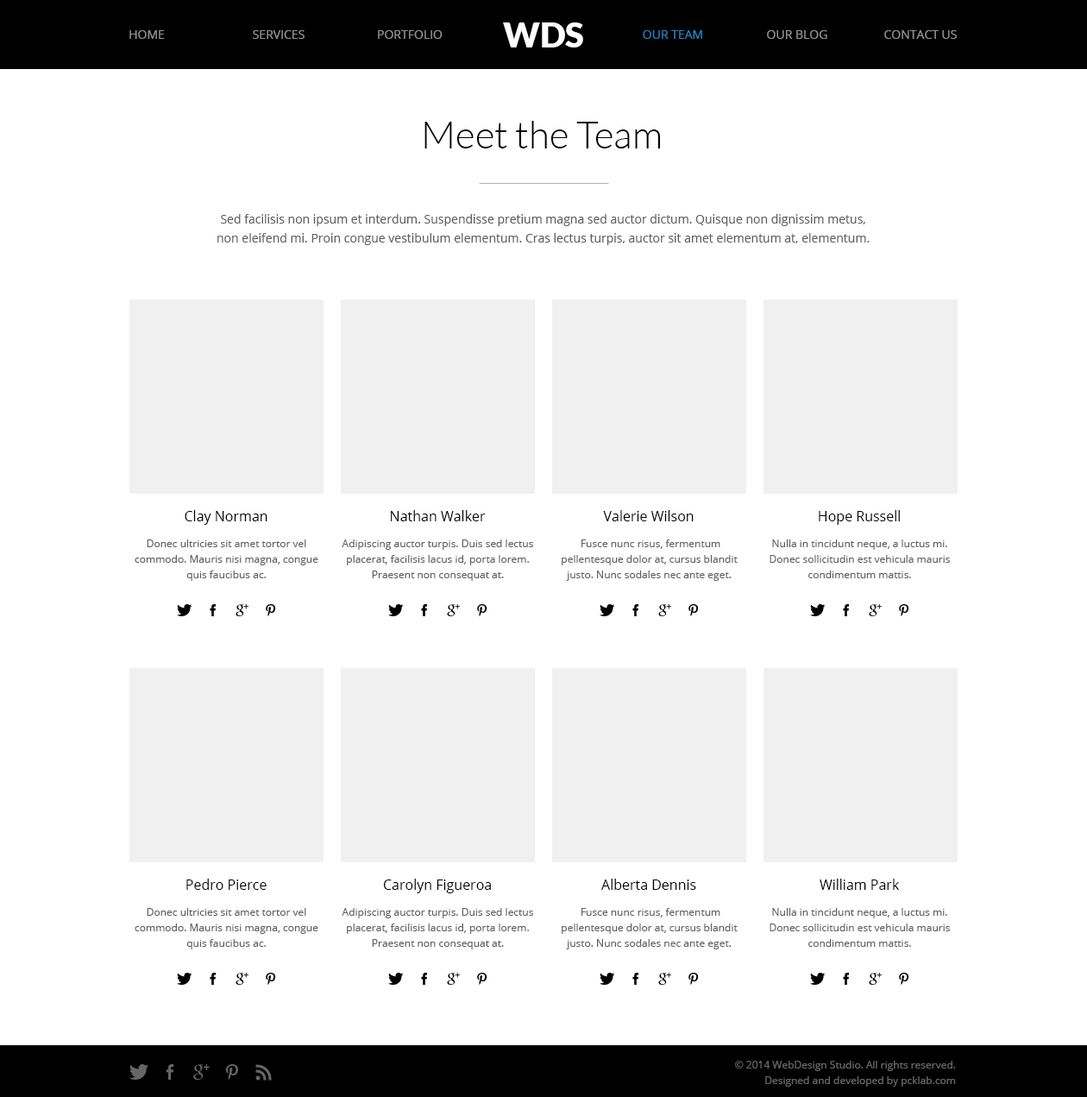
<style>
.page{position:relative;width:1087px;height:1097px;background:#ffffff}
.page>*{position:absolute;margin:0}
.t1{font:34.5px "Lato-Black";color:#ffffff;text-transform:uppercase}
.t2{font:12.1px "OpenSans";color:#909090;text-transform:uppercase}
.t3{font:12.1px "OpenSans";color:#2980b9;text-transform:uppercase}
.t4{font:38px "Lato-Light";color:#000000}
.t5{font:12.1px/19px "OpenSans";color:#606060}
.t6{font:13.8px "OpenSans";color:#000000}
.t7{font:10.4px/15.5px "OpenSans";color:#606060}
.t8{font:10.4px/15.5px "OpenSans";color:#666666}
</style>
<div class="page">
<p class="t1" style="left:503px;top:22px;width:80px;height:25px">WDs</p>
<p class="t2" style="left:129px;top:30px;width:36px;height:9px">home</p>
<p class="t2" style="left:253px;top:30px;width:52px;height:9px">services</p>
<p class="t2" style="left:378px;top:30px;width:65px;height:9px">Portfolio</p>
<p class="t3" style="left:643px;top:30px;width:59px;height:9px">our team</p>
<p class="t2" style="left:767px;top:30px;width:61px;height:9px">our blog</p>
<p class="t2" style="left:884px;top:30px;width:73px;height:9px">Contact us</p>
<p class="t4" style="left:425px;top:121px;width:236px;height:27px">Meet the Team</p>
<p class="t5" style="left:217px;top:214px;width:653px;height:31px;text-align:center">Sed facilisis non ipsum et interdum. Suspendisse pretium magna sed auctor dictum. Quisque non dignissim metus, non eleifend mi. Proin congue vestibulum elementum. Cras lectus turpis, auctor sit amet elementum at, elementum.</p>
<p class="t6" style="left:185px;top:510px;width:82px;height:15px">Clay Norman</p>
<p class="t6" style="left:391px;top:510px;width:95px;height:11px">Nathan Walker</p>
<p class="t6" style="left:603px;top:510px;width:91px;height:11px">Valerie Wilson</p>
<p class="t6" style="left:819px;top:510px;width:81px;height:15px">Hope Russell</p>
<p class="t7" style="left:135px;top:539px;width:183px;height:42px;text-align:center">Donec ultricies sit amet tortor vel commodo. Mauris nisi magna, congue quis faucibus ac.</p>
<p class="t7" style="left:342px;top:539px;width:191px;height:42px;text-align:center">Adipiscing auctor turpis. Duis sed lectus placerat, facilisis lacus id, porta lorem. Praesent non consequat at.</p>
<p class="t7" style="left:562px;top:539px;width:176px;height:42px;text-align:center">Fusce nunc risus, fermentum pellentesque dolor at, cursus blandit justo. Nunc sodales nec ante eget.</p>
<p class="t7" style="left:770px;top:539px;width:180px;height:39px;text-align:center">Nulla in tincidunt neque, a luctus mi. Donec sollicitudin est vehicula mauris condimentum mattis.</p>
<p class="t6" style="left:186px;top:878px;width:81px;height:12px">Pedro Pierce</p>
<p class="t6" style="left:383px;top:878px;width:108px;height:15px">Carolyn Figueroa</p>
<p class="t6" style="left:601px;top:878px;width:95px;height:12px">Alberta Dennis</p>
<p class="t6" style="left:820px;top:878px;width:80px;height:12px">William Park</p>
<p class="t7" style="left:135px;top:908px;width:183px;height:41px;text-align:center">Donec ultricies sit amet tortor vel commodo. Mauris nisi magna, congue quis faucibus ac.</p>
<p class="t7" style="left:342px;top:908px;width:191px;height:41px;text-align:center">Adipiscing auctor turpis. Duis sed lectus placerat, facilisis lacus id, porta lorem. Praesent non consequat at.</p>
<p class="t7" style="left:562px;top:908px;width:176px;height:41px;text-align:center">Fusce nunc risus, fermentum pellentesque dolor at, cursus blandit justo. Nunc sodales nec ante eget.</p>
<p class="t7" style="left:770px;top:908px;width:180px;height:39px;text-align:center">Nulla in tincidunt neque, a luctus mi. Donec sollicitudin est vehicula mauris condimentum mattis.</p>
<p class="t8" style="left:735px;top:1061px;width:221px;height:25px;text-align:right">© 2014 WebDesign Studio. All rights reserved.<br>Designed and developed by pcklab.com</p>
</div>
